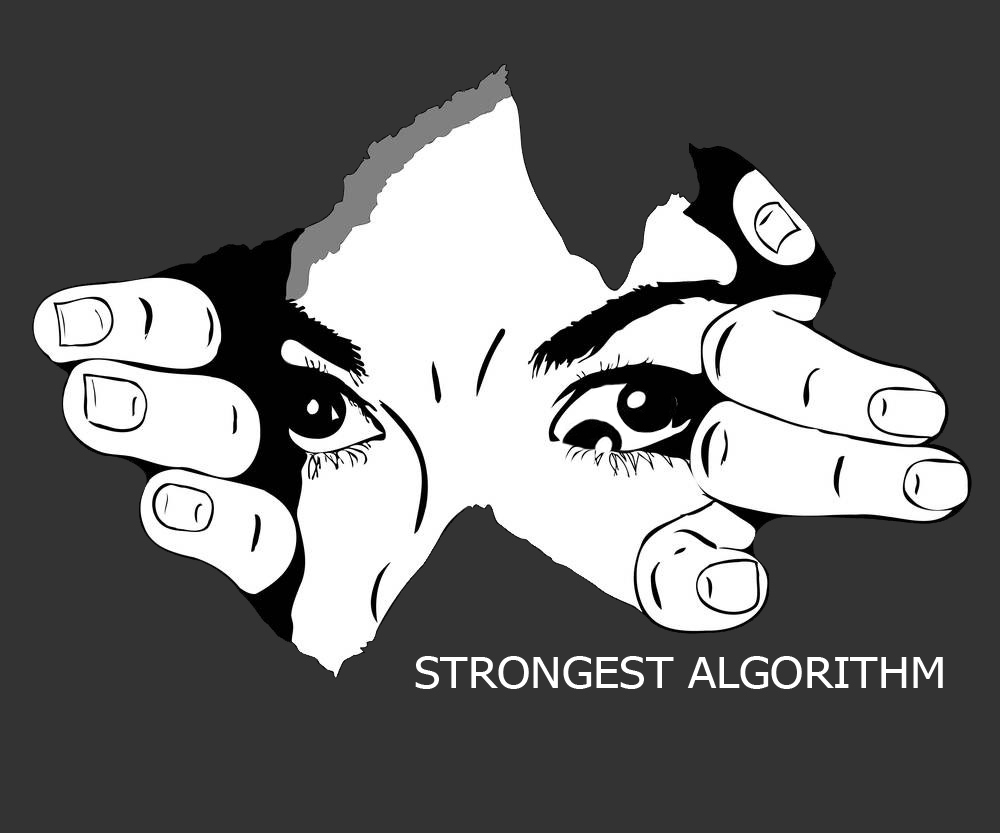
<style>
.page{position:relative;width:1000px;height:833px;background:#333333}
.page>*{position:absolute;margin:0}
.t1{font:42.1px "Tahoma";color:#ffffff;scale:1.12 1}
</style>
<div class="page">
<p class="t1" style="left:415px;top:656px;width:528px;height:33px">STRONGEST ALGORITHM</p>
</div>
